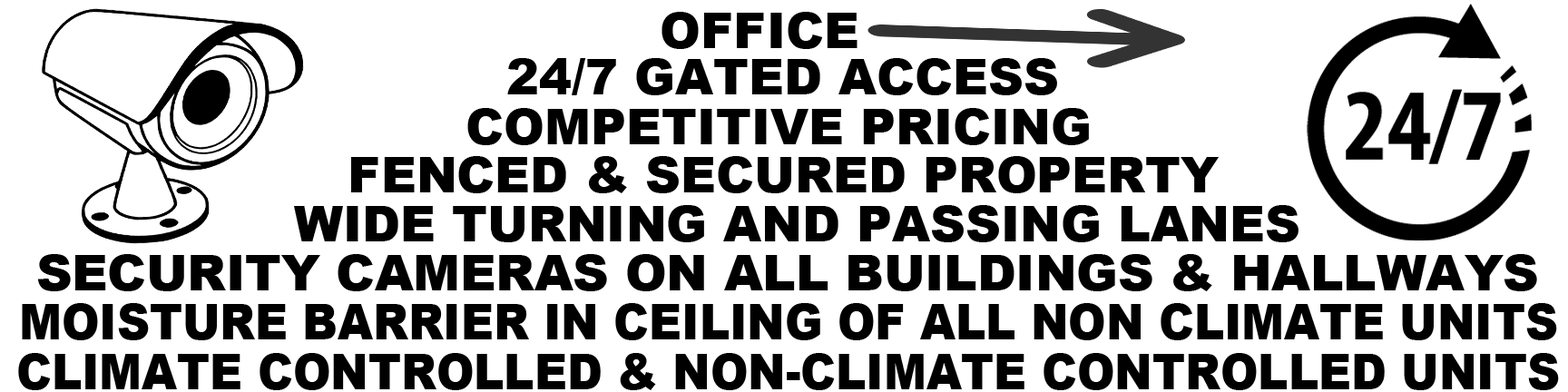
<style>
.page{position:relative;width:1568px;height:392px;background:#ffffff}
.page>*{position:absolute;margin:0}
.t1{font:49px "Arial-Black";color:#000000;text-transform:uppercase}
.t2{font:49px "Arial-Black";color:#000000;text-transform:uppercase;scale:0.92 1}
</style>
<div class="page">
<p class="t1" style="left:662px;top:12px;width:196px;height:37px">Office</p>
<p class="t1" style="left:507px;top:58px;width:550px;height:37px">24/7 Gated Access</p>
<p class="t1" style="left:467px;top:108px;width:622px;height:37px">competitive pricing</p>
<p class="t1" style="left:351px;top:156px;width:868px;height:37px">fenced &amp; secured property</p>
<p class="t1" style="left:294px;top:205px;width:1004px;height:37px">wide turning and passing lanes</p>
<p class="t1" style="left:37px;top:254px;width:1500px;height:37px">security cameras on all buildings &amp; hallways</p>
<p class="t2" style="left:22px;top:303px;width:1535px;height:37px">moisture barrier in ceiling of all non climate units</p>
<p class="t2" style="left:18px;top:353px;width:1541px;height:37px">climate controlled &amp; non-climate controlled units</p>
</div>
